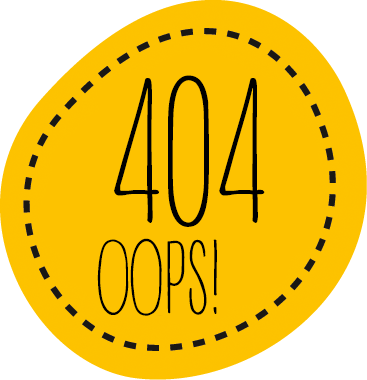
<style>
.page{position:relative;width:367px;height:380px;background:#fdc200}
.page>*{position:absolute;margin:0}
.t1{font:200px "ADAYWITHOUTSUN";letter-spacing:0.025em;color:#000000}
.t2{font:100px "ADAYWITHOUTSUN";letter-spacing:0.025em;color:#000000}
</style>
<div class="page">
<p class="t1" style="left:114px;top:75px;width:151px;height:152px">404</p>
<p class="t2" style="left:97px;top:238px;width:120px;height:78px">OOPS!</p>
</div>
